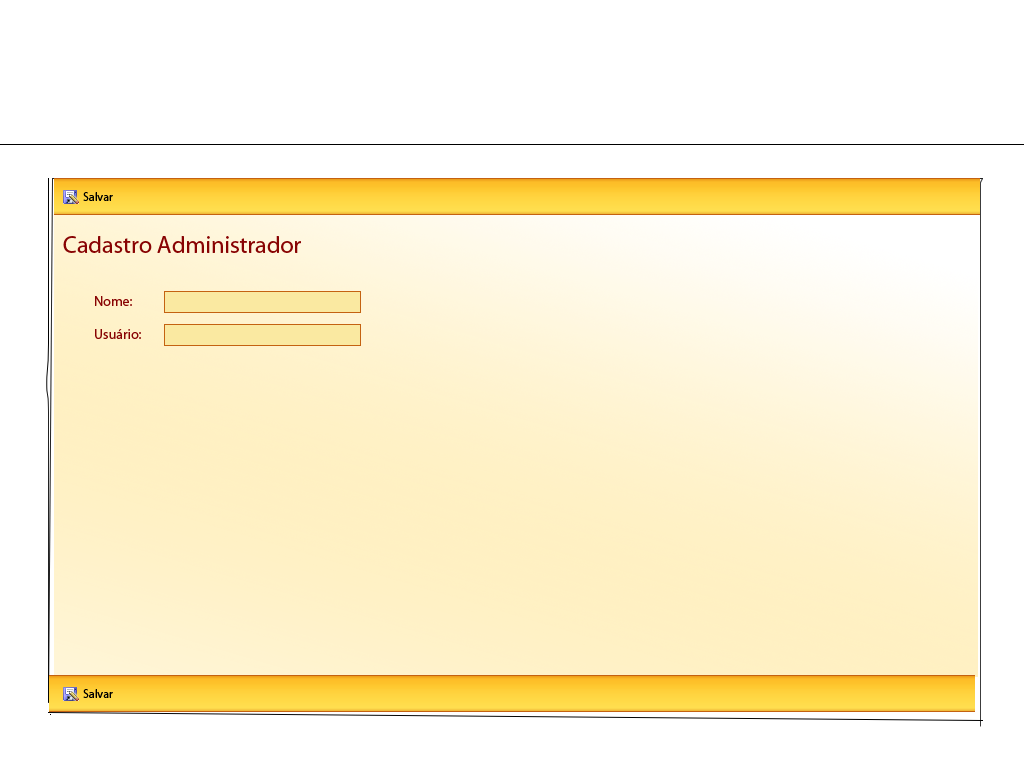
<style>
.page{position:relative;width:1024px;height:768px;background:#ffffff}
.page>*{position:absolute;margin:0}
.t1{font:12px "MyriadPro-Regular";color:#000000}
.t2{font:24px "MyriadPro-Regular";color:#880303}
.t3{font:14px "MyriadPro-Regular";color:#880303}
</style>
<div class="page">
<p class="t1" style="left:83px;top:192px;width:30px;height:9px">Salvar</p>
<p class="t2" style="left:63px;top:236px;width:238px;height:17px">Cadastro Administrador</p>
<p class="t3" style="left:95px;top:296px;width:37px;height:10px">Nome:</p>
<p class="t3" style="left:95px;top:329px;width:46px;height:10px">Usuário:</p>
<p class="t1" style="left:83px;top:689px;width:30px;height:9px">Salvar</p>
</div>
